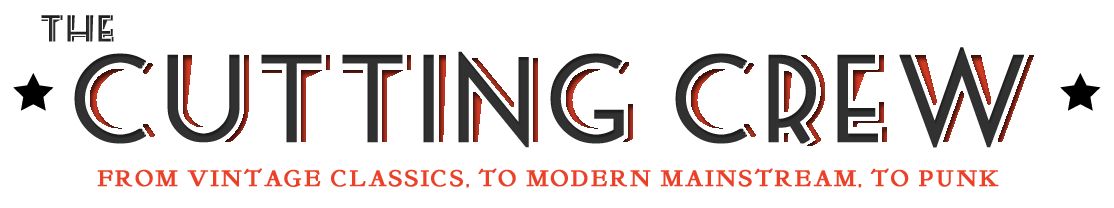
<style>
.page{position:relative;width:1114px;height:208px;background:#ffffff}
.page>*{position:absolute;margin:0}
.t1{font:23px "KelmscottRoman";letter-spacing:0.095em;color:#ea4128;text-transform:uppercase;font-weight:bold;scale:0.95 1}
</style>
<div class="page">
<p class="t1" style="left:97px;top:168px;width:902px;height:20px">From vintage classics, to modern mainstream, to punk</p>
</div>
